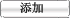
<style>
.page{position:relative;width:70px;height:18px;background:#ffffff}
.page>*{position:absolute;margin:0}
.t1{font:12px "SimSun"}
</style>
<div class="page">
<p class="t1" style="left:20px;top:2px;width:23px;height:11px">添加</p>
</div>
